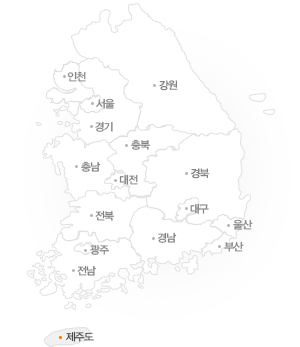
<style>
.page{position:relative;width:300px;height:347px;background:#ffffff}
.page>*{position:absolute;margin:0}
.t1{font:10.7px "YDIYGO330";letter-spacing:-0.075em;color:#838383}
.t2{font:10.7px "YDIYGO330";letter-spacing:-0.075em;color:#4e4e4e}
</style>
<div class="page">
<p class="t1" style="left:67px;top:71px;width:19px;height:11px">인천</p>
<p class="t1" style="left:159px;top:80px;width:19px;height:11px">강원</p>
<p class="t1" style="left:96px;top:98px;width:19px;height:11px">서울</p>
<p class="t1" style="left:95px;top:121px;width:18px;height:11px">경기</p>
<p class="t1" style="left:131px;top:139px;width:19px;height:11px">충북</p>
<p class="t1" style="left:81px;top:161px;width:20px;height:11px">충남</p>
<p class="t1" style="left:119px;top:174px;width:19px;height:11px">대전</p>
<p class="t1" style="left:191px;top:168px;width:19px;height:11px">경북</p>
<p class="t1" style="left:190px;top:203px;width:19px;height:11px">대구</p>
<p class="t1" style="left:95px;top:210px;width:19px;height:11px">전북</p>
<p class="t1" style="left:233px;top:219px;width:20px;height:11px">울산</p>
<p class="t1" style="left:157px;top:232px;width:20px;height:11px">경남</p>
<p class="t1" style="left:90px;top:244px;width:20px;height:11px">광주</p>
<p class="t1" style="left:224px;top:241px;width:20px;height:11px">부산</p>
<p class="t1" style="left:77px;top:265px;width:19px;height:11px">전남</p>
<p class="t2" style="left:65px;top:331px;width:29px;height:11px">제주도</p>
</div>
